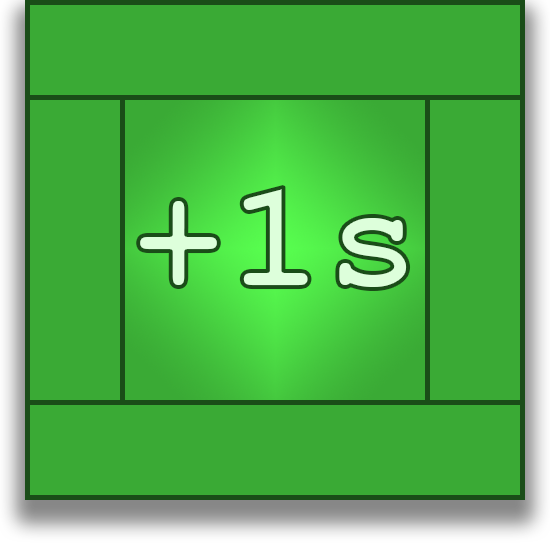
<style>
.page{position:relative;width:550px;height:550px;background:#3aaa35}
.page>*{position:absolute;margin:0}
.t1{font:155px "CourierNewPS-BoldMT";color:#ddffdb}
</style>
<div class="page">
<p class="t1" style="left:138px;top:187px;width:271px;height:102px">+1s</p>
</div>
